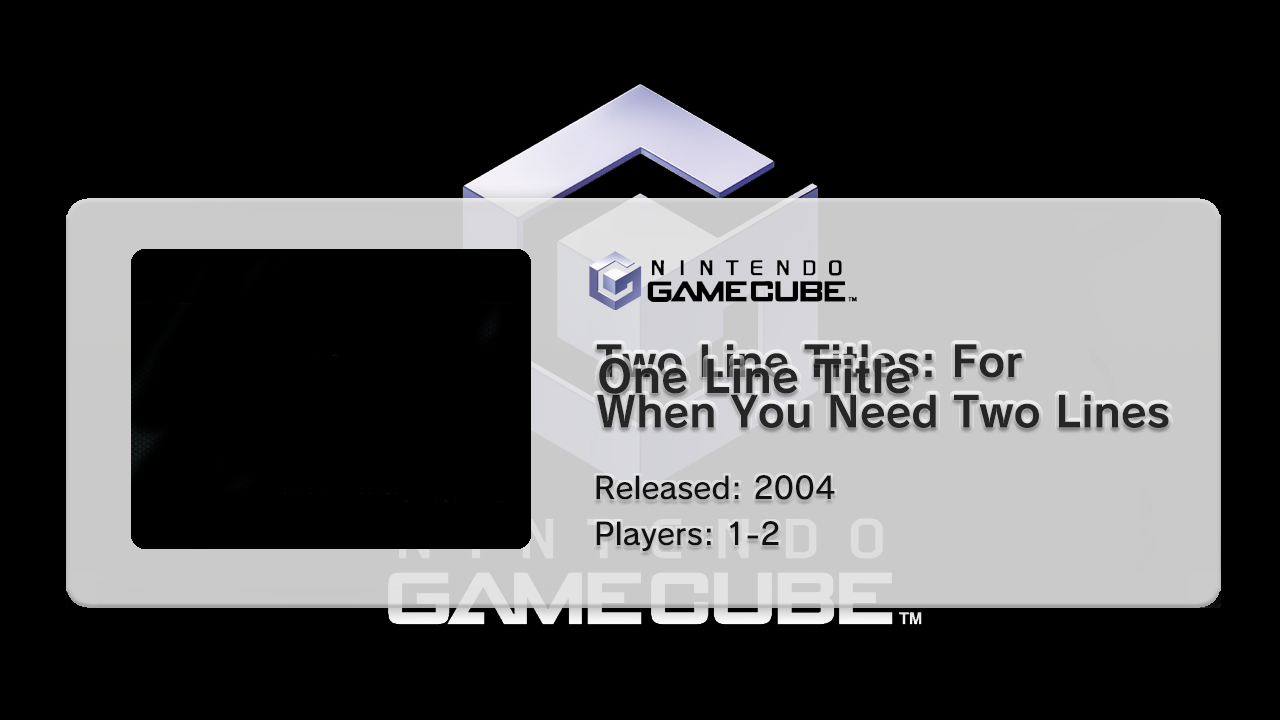
<style>
.page{position:relative;width:1280px;height:720px;background:#000000}
.page>*{position:absolute;margin:0}
.t1{font:42px "SCEPS3RodinLATIN-Bold";color:#262626}
.t2{font:44px "SCEPS3RodinLATIN-Bold";color:#262626}
.t3{font:30px "SCEPS3RodinLATIN-Regular";color:#101010}
</style>
<div class="page">
<p class="t1" style="left:596px;top:344px;width:573px;height:84px">Two Line Titles: For<br>When You Need Two Lines</p>
<p class="t2" style="left:599px;top:357px;width:311px;height:37px">One Line Title</p>
<p class="t3" style="left:596px;top:475px;width:239px;height:25px">Released: 2004</p>
<p class="t3" style="left:596px;top:521px;width:183px;height:30px">Players: 1-2</p>
</div>
